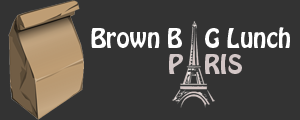
<style>
.page{position:relative;width:300px;height:120px;background:#333333}
.page>*{position:absolute;margin:0}
.t1{font:24px "HoboStd";color:#ffffff}
.t2{font:24px "HoboStd";color:#d3c7c7}
</style>
<div class="page">
<p class="t1" style="left:91px;top:27px;width:199px;height:21px">Brown B   G Lunch</p>
<p class="t2" style="left:169px;top:54px;width:73px;height:20px">P   RIS</p>
</div>
